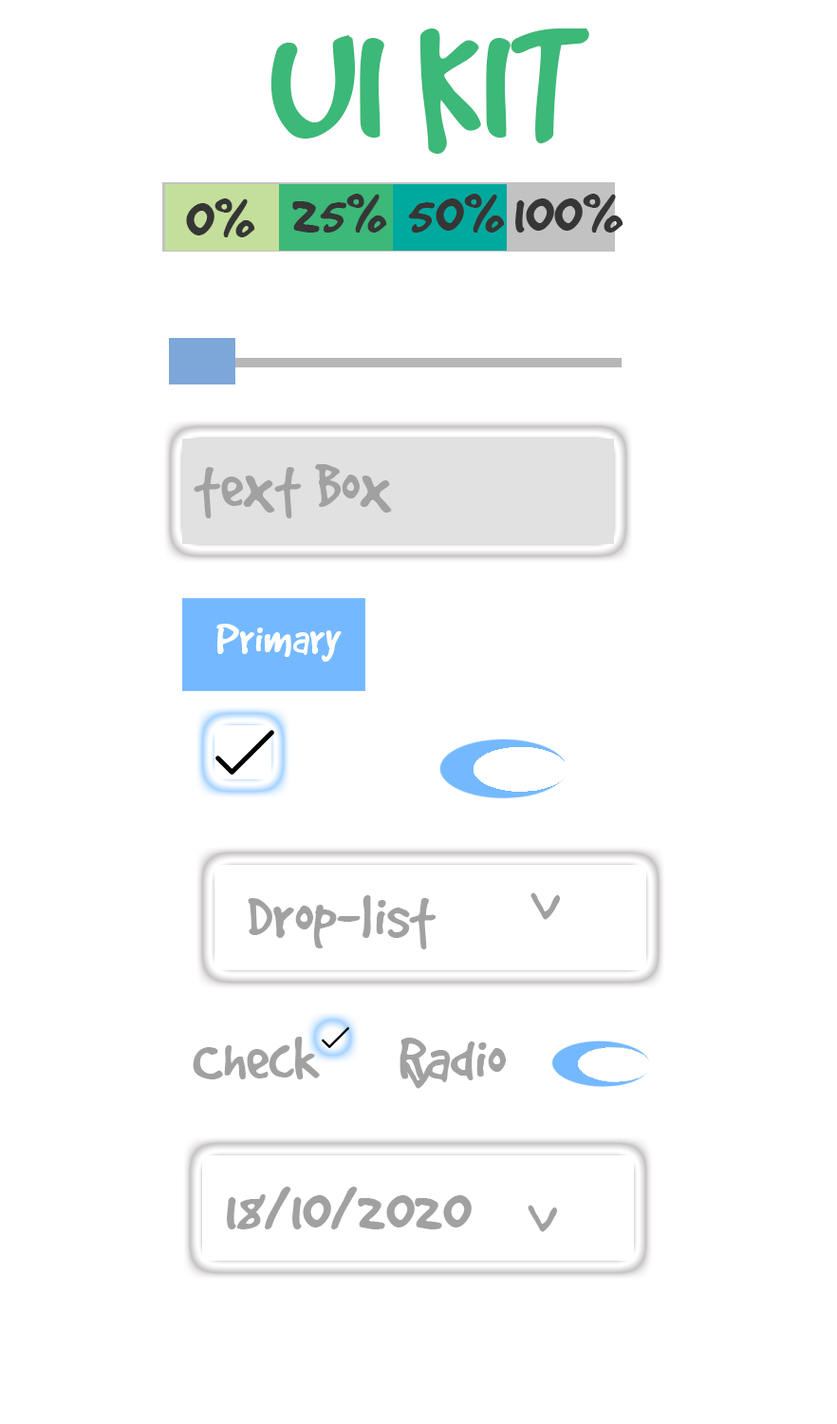
<style>
.page{position:relative;width:837px;height:1424px;background:#ffffff}
.page>*{position:absolute;margin:0}
.t1{font:182px "GoodDogPlain";color:#3cb878}
.t2{font:67.2px "GoodDogPlain";color:#363636}
.t3{font:67.2px "GoodDogPlain";color:#a1a1a1}
.t4{font:47.8px "GoodDogPlain";color:#ffffff}
</style>
<div class="page">
<p class="t1" style="left:271px;top:28px;width:319px;height:126px">UI KIT</p>
<p class="t2" style="left:292px;top:194px;width:95px;height:39px">25%</p>
<p class="t2" style="left:408px;top:194px;width:97px;height:39px">50%</p>
<p class="t2" style="left:516px;top:194px;width:108px;height:39px">100%</p>
<p class="t2" style="left:186px;top:198px;width:69px;height:39px">0%</p>
<p class="t3" style="left:194px;top:464px;width:198px;height:54px">text Box</p>
<p class="t4" style="left:216px;top:624px;width:126px;height:38px">Primary</p>
<p class="t3" style="left:531px;top:892px;width:29px;height:28px;rotate:97deg">&gt;</p>
<p class="t3" style="left:248px;top:895px;width:189px;height:54px">Drop-list</p>
<p class="t3" style="left:193px;top:1037px;width:127px;height:42px">Check</p>
<p class="t3" style="left:400px;top:1038px;width:106px;height:44px">Radio</p>
<p class="t3" style="left:403px;top:1061px;width:30px;height:28px;rotate:97deg">&gt;</p>
<p class="t3" style="left:227px;top:1187px;width:245px;height:42px">18/10/2020</p>
<p class="t3" style="left:528px;top:1205px;width:29px;height:27px;rotate:97deg">&gt;</p>
</div>
